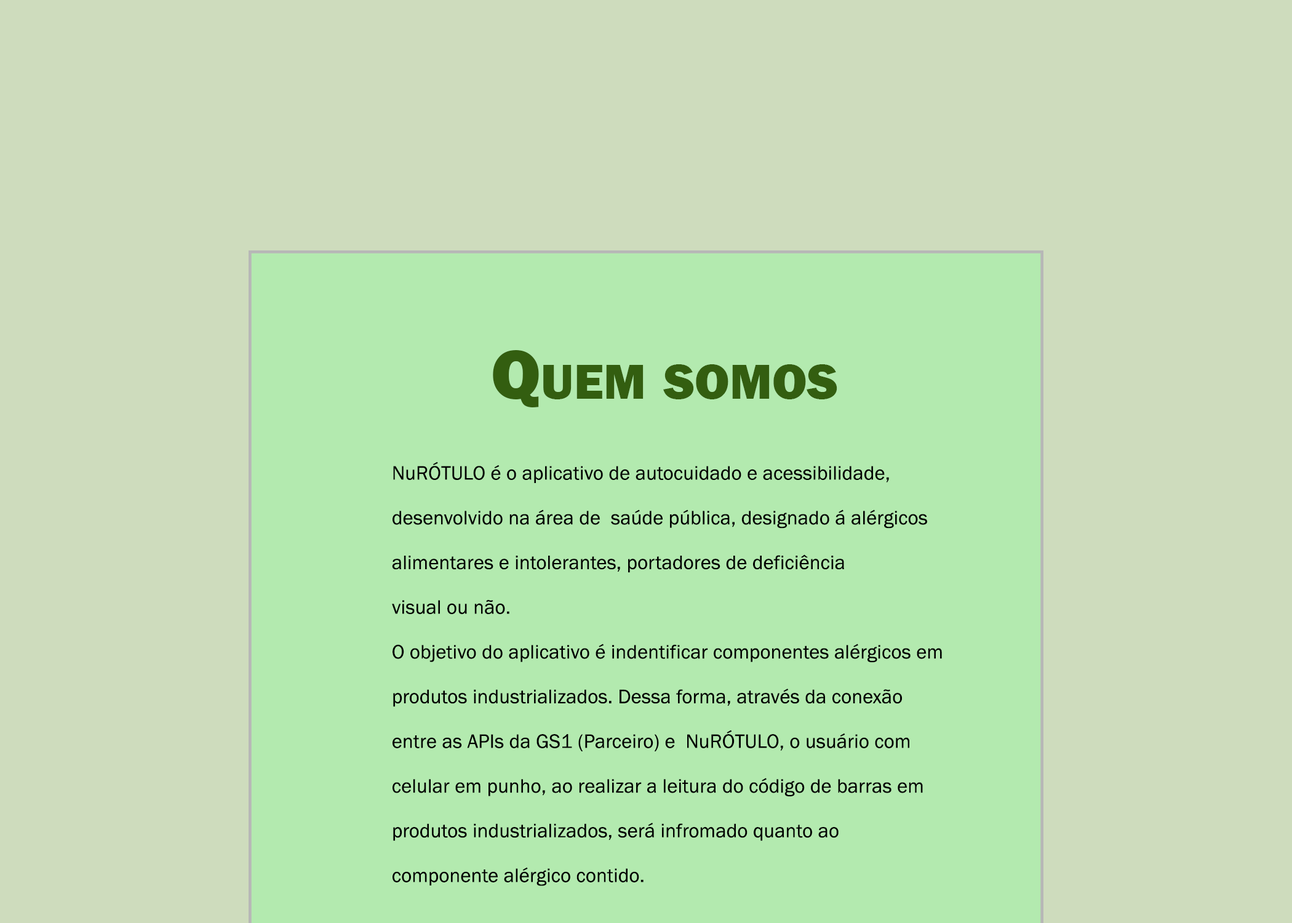
<style>
.page{position:relative;width:1292px;height:923px;background:#cedcbd}
.page>*{position:absolute;margin:0}
.t1{font:123.1px "FranklinGothic-Heavy";letter-spacing:0.005em;color:#335e10;font-variant:small-caps}
.t2{font:34.5px/26.5px "FranklinGothic-Book";letter-spacing:0.005em;color:#000000}
</style>
<div class="page">
<p class="t1" style="left:493px;top:350px;width:344px;height:57px">Quem somos</p>
<p class="t2" style="left:392px;top:461px;width:550px;height:425px">NuRÓTULO é o aplicativo de autocuidado e acessibilidade, <br>desenvolvido na área de  saúde pública, designado á alérgicos <br>alimentares e intolerantes, portadores de deficiência <br>visual ou não.<br>O objetivo do aplicativo é indentificar componentes alérgicos em<br>produtos industrializados. Dessa forma, através da conexão <br>entre as APIs da GS1 (Parceiro) e  NuRÓTULO, o usuário com <br>celular em punho, ao realizar a leitura do código de barras em<br>produtos industrializados, será infromado quanto ao <br>componente alérgico contido.</p>
</div>
